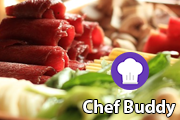
<style>
.page{position:relative;width:180px;height:120px}
.page>*{position:absolute;margin:0}
.t1{font:18px "MyriadPro-Bold";color:#ffffff}
</style>
<div class="page">
<p class="t1" style="left:83px;top:100px;width:93px;height:17px">Chef Buddy</p>
</div>
